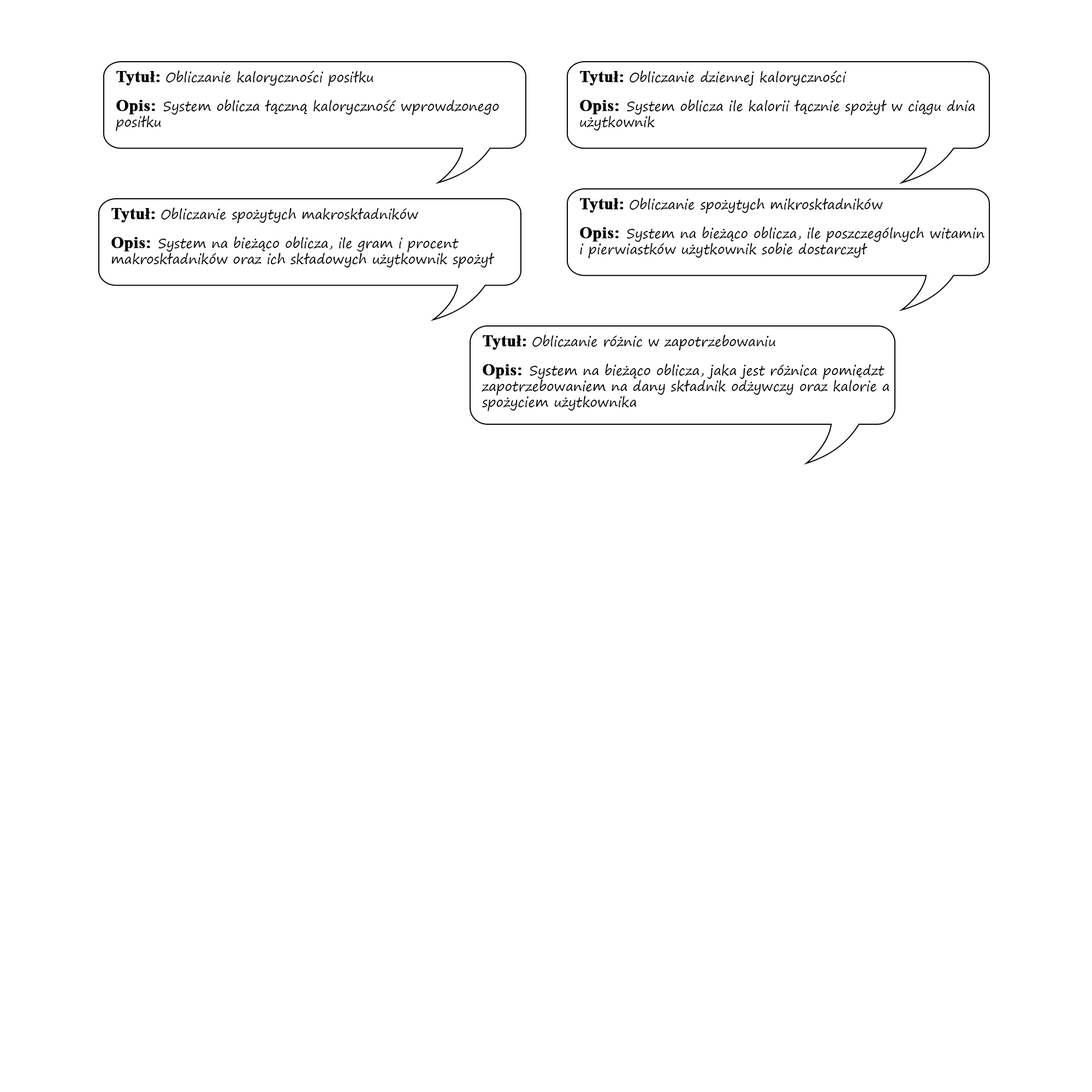
<style>
.page{position:relative;width:1092px;height:1092px;background:#ffffff}
.page>*{position:absolute;margin:0}
.t1{font:13.1px "SegoePrint";color:#000000}
.t2{font:16.4px "TimesNewRomanPS-BoldMT";color:#000000;font-weight:bold}
</style>
<div class="page">
<p class="t1" style="left:116px;top:70px;width:383px;height:61px"><span class="t2">Tytuł: </span>Obliczanie kaloryczności posiłku<br><br><span class="t2">Opis:  </span>System oblicza łączną kaloryczność wprowdzonego posiłku</p>
<p class="t1" style="left:580px;top:70px;width:395px;height:60px"><span class="t2">Tytuł: </span>Obliczanie dziennej kaloryczności<br><br><span class="t2">Opis:  </span>System oblicza ile kalorii łącznie spożył w ciągu dnia użytkownik</p>
<p class="t1" style="left:580px;top:198px;width:405px;height:60px"><span class="t2">Tytuł: </span>Obliczanie spożytych mikroskładników<br><br><span class="t2">Opis:  </span>System na bieżąco oblicza, ile poszczególnych witamin i pierwiastków użytkownik sobie dostarczył</p>
<p class="t1" style="left:111px;top:207px;width:384px;height:61px"><span class="t2">Tytuł: </span>Obliczanie spożytych makroskładników<br><br><span class="t2">Opis:  </span>System na bieżąco oblicza, ile gram i procent makroskładników oraz ich składowych użytkownik spożył</p>
<p class="t1" style="left:482px;top:335px;width:407px;height:76px"><span class="t2">Tytuł: </span>Obliczanie różnic w zapotrzebowaniu<br><br><span class="t2">Opis:  </span>System na bieżąco oblicza, jaka jest różnica pomiędzt zapotrzebowaniem na dany składnik odżywczy oraz kalorie a spożyciem użytkownika</p>
</div>
